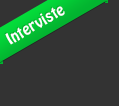
<style>
.page{position:relative;width:119px;height:106px;background:#333333}
.page>*{position:absolute;margin:0}
.t1{font:14px "HoboStd";letter-spacing:0.02em;color:#ffffff}
</style>
<div class="page">
<p class="t1" style="left:5px;top:6px;width:60px;height:39px;rotate:-30deg">Interviste</p>
</div>
